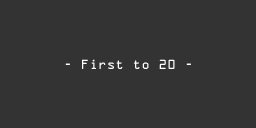
<style>
.page{position:relative;width:256px;height:128px;background:#333333}
.page>*{position:absolute;margin:0}
.t1{font:12px "OCRAStd";color:#ffffff}
</style>
<div class="page">
<p class="t1" style="left:65px;top:59px;width:126px;height:10px">- First to 20 -</p>
</div>
